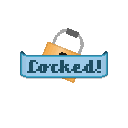
<style>
.page{position:relative;width:128px;height:128px;background:#ffffff}
.page>*{position:absolute;margin:0}
.t1{font:18px "Superscript";color:#1e4e62}
</style>
<div class="page">
<p class="t1" style="left:27px;top:60px;width:74px;height:13px">Locked!</p>
</div>
